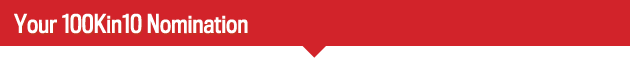
<style>
.page{position:relative;width:630px;height:58px;background:#d2232a}
.page>*{position:absolute;margin:0}
.t1{font:24px "TitlingGothicFB-StandardCond";color:#ffffff}
</style>
<div class="page">
<p class="t1" style="left:14px;top:13px;width:234px;height:21px">Your 100Kin10 Nomination</p>
</div>
